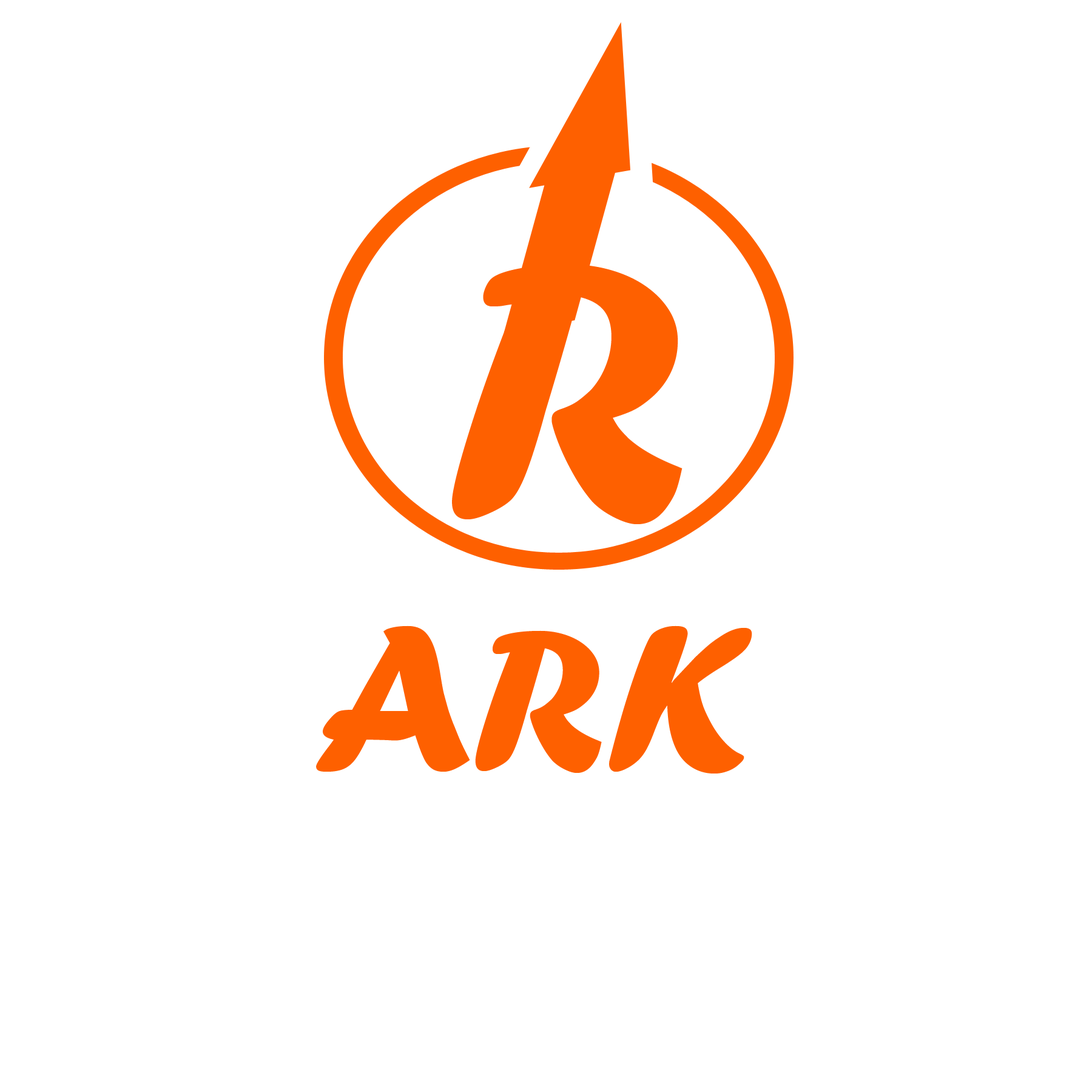
<style>
.page{position:relative;width:1092px;height:1092px;background:#ffffff}
.page>*{position:absolute;margin:0}
.t1{font:394.3px "ForteMT";color:#fe6000}
.t2{font:216px "ForteMT";color:#fe6000}
</style>
<div class="page">
<p class="t1" style="left:452px;top:264px;width:230px;height:260px">R</p>
<p class="t2" style="left:316px;top:625px;width:436px;height:148px">ARK</p>
</div>
